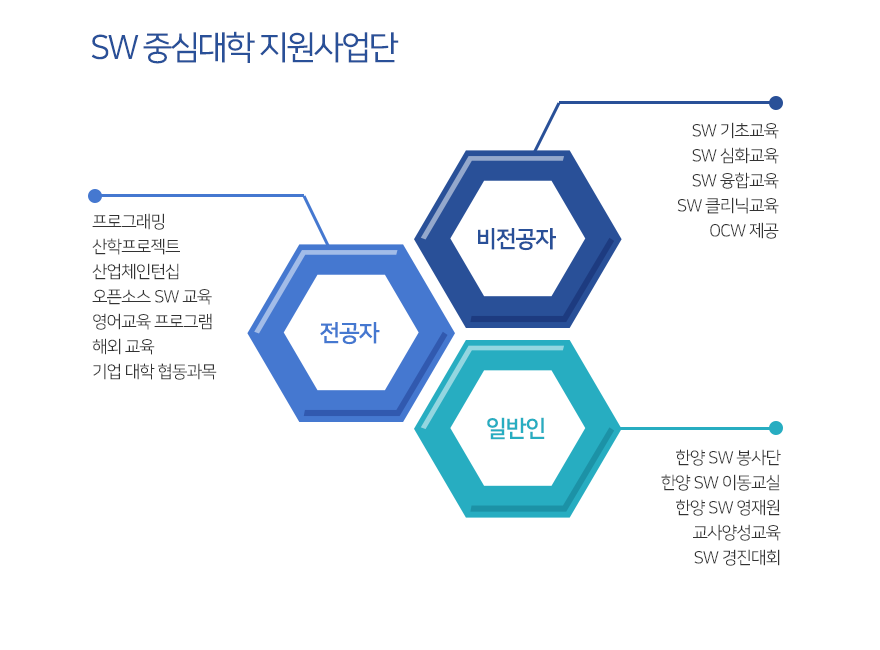
<style>
.page{position:relative;width:880px;height:650px;background:#ffffff}
.page>*{position:absolute;margin:0}
.t1{font:33px "NanumSquareR";letter-spacing:-0.075em;color:#295098}
.t2{font:17px/25px "NanumSquareR";letter-spacing:-0.05em;color:#333333}
.t3{font:23px "NanumSquareB";letter-spacing:-0.05em;color:#295098}
.t4{font:23px "NanumSquareB";letter-spacing:-0.05em;color:#4578d0}
.t5{font:23px "NanumSquareB";letter-spacing:-0.05em;color:#27adc1}
</style>
<div class="page">
<p class="t1" style="left:91px;top:31px;width:308px;height:33px">SW 중심대학 지원사업단</p>
<p class="t2" style="left:677px;top:122px;width:102px;height:117px;text-align:right">SW 기초교육<br>SW 심화교육<br>SW 융합교육<br>SW 클리닉교육<br>OCW 제공</p>
<p class="t2" style="left:92px;top:213px;width:125px;height:167px">프로그래밍<br>산학프로젝트<br>산업체인턴십<br>오픈소스 SW 교육<br>영어교육 프로그램<br>해외 교육<br>기업 대학 협동과목</p>
<p class="t3" style="left:478px;top:228px;width:78px;height:23px">비전공자</p>
<p class="t4" style="left:320px;top:322px;width:60px;height:23px">전공자</p>
<p class="t5" style="left:487px;top:417px;width:58px;height:23px">일반인</p>
<p class="t2" style="left:661px;top:449px;width:120px;height:117px;text-align:right">한양 SW 봉사단<br>한양 SW 이동교실<br>한양 SW 영재원<br>교사양성교육<br>SW 경진대회</p>
</div>
